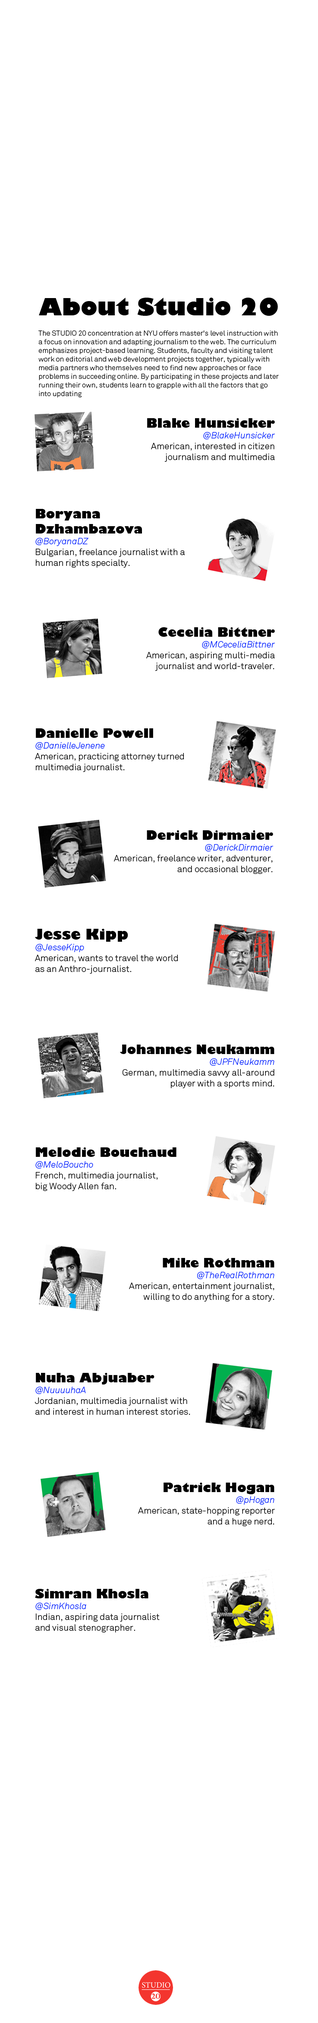
<style>
.page{position:relative;width:318px;height:2023px;background:#ffffff}
.page>*{position:absolute;margin:0}
.t1{font:23.4px "GillSans-UltraBold";color:#000000}
.t2{font:7.2px "AkkuratLightProRegular";color:#000000}
.t3{font:9px "AkkuratLightProRegular";color:#000000}
.t4{font:12.6px "GillSans-UltraBold";color:#000000}
.t5{font:9px "AkkuratLightProItalic";color:#001eff}
.t6{font:14.4px "GillSans-UltraBold";color:#000000}
</style>
<div class="page">
<p class="t1" style="left:39px;top:298px;width:239px;height:18px">About Studio 20</p>
<p class="t2" style="left:38px;top:330px;width:241px;height:67px">The STUDIO 20 concentration at NYU offers master's level instruction with <br>a focus on innovation and adapting journalism to the web. The curriculum emphasizes project-based learning. Students, faculty and visiting talent work on editorial and web development projects together, typically with media partners who themselves need to find new approaches or face <br>problems in succeeding online. By participating in these projects and later running their own, students learn to grapple with all the factors that go <br>into updating <br>journalism for the web era.</p>
<p class="t3" style="left:147px;top:418px;width:129px;height:44px;text-align:right"><span class="t4">Blake Hunsicker<br></span><span class="t5">@BlakeHunsicker<br></span>American, interested in citizen <br>journalism and multimedia</p>
<p class="t3" style="left:35px;top:509px;width:150px;height:59px"><span class="t4">Boryana <br>Dzhambazova<br></span><span class="t5">@BoryanaDZ<br></span>Bulgarian, freelance journalist with a <br>human rights specialty.</p>
<p class="t3" style="left:146px;top:627px;width:130px;height:44px;text-align:right"><span class="t4">Cecelia Bittner<br></span><span class="t5">@MCeceliaBittner<br></span>American, aspiring multi-media <br>journalist and world-traveler.</p>
<p class="t3" style="left:35px;top:728px;width:149px;height:44px"><span class="t4">Danielle Powell<br></span><span class="t5">@DanielleJenene<br></span>American, practicing attorney turned <br>multimedia journalist.</p>
<p class="t3" style="left:114px;top:830px;width:160px;height:44px;text-align:right"><span class="t4">Derick Dirmaier<br></span><span class="t5">@DerickDirmaier<br></span>American, freelance writer, adventurer, <br>and occasional blogger.</p>
<p class="t3" style="left:35px;top:929px;width:143px;height:45px"><span class="t6">Jesse Kipp<br></span><span class="t5">@JesseKipp<br></span>American, wants to travel the world <br>as an Anthro-journalist.</p>
<p class="t3" style="left:120px;top:1045px;width:155px;height:43px;text-align:right"><span class="t4">Johannes Neukamm<br></span><span class="t5">@JPFNeukamm<br></span>German, multimedia savvy all-around <br>player with a sports mind.</p>
<p class="t3" style="left:35px;top:1147px;width:142px;height:44px"><span class="t4">Melodie Bouchaud<br></span><span class="t5">@MeloBoucho<br></span>French, multimedia journalist, <br>big Woody Allen fan.</p>
<p class="t3" style="left:129px;top:1258px;width:146px;height:44px;text-align:right"><span class="t4">Mike Rothman<br></span><span class="t5">@TheRealRothman<br></span>American, entertainment journalist, <br>willing to do anything for a story.</p>
<p class="t3" style="left:35px;top:1373px;width:156px;height:42px"><span class="t4">Nuha Abjuaber<br></span><span class="t5">@NuuuuhaA<br></span>Jordanian, multimedia journalist with<br>and interest in human interest stories.</p>
<p class="t3" style="left:138px;top:1483px;width:137px;height:43px;text-align:right"><span class="t4">Patrick Hogan<br></span><span class="t5">@pHogan<br></span>American, state-hopping reporter<br>and a huge nerd.</p>
<p class="t3" style="left:35px;top:1589px;width:125px;height:44px"><span class="t4">Simran Khosla<br></span><span class="t5">@SimKhosla<br></span>Indian, aspiring data journalist <br>and visual stenographer.</p>
</div>
